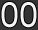
<style>
.page{position:relative;width:38px;height:30px;background:#333333}
.page>*{position:absolute;margin:0}
.t1{font:35px "ArialMT";letter-spacing:0.01em;color:#f5f5f5}
</style>
<div class="page">
<p class="t1" style="left:1px;top:2px;width:36px;height:26px">00</p>
</div>
